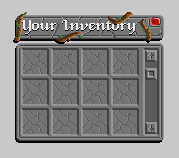
<style>
.page{position:relative;width:179px;height:158px;background:#c8c8c8}
.page>*{position:absolute;margin:0}
.t1{font:19px "VeniceClassic";color:#ececec}
</style>
<div class="page">
<p class="t1" style="left:22px;top:20px;width:113px;height:14px">Your Inventory</p>
</div>
